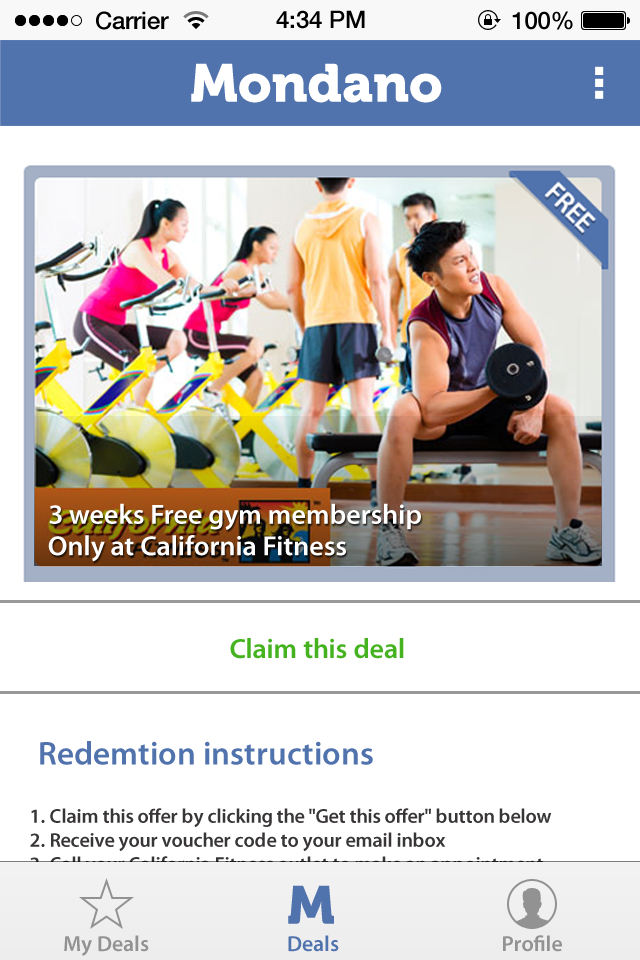
<style>
.page{position:relative;width:640px;height:960px;background:#ffffff}
.page>*{position:absolute;margin:0}
.t1{font:24px "HelveticaNeue-Medium";color:#000000}
.t2{font:53.3px "Museo900-Regular";color:#ffffff}
.t3{font:28px "MyriadPro-Semibold";color:#ffffff}
.t4{font:28px "MyriadPro-Semibold";letter-spacing:0.005em;color:#45b21f}
.t5{font:33px "MyriadPro-Semibold";color:#5173ad}
.t6{font:20px "MyriadPro-Semibold"}
.t7{font:53.3px "Museo900-Regular";color:#5173ad}
.t8{font:22px "MyriadPro-Semibold";color:#929292}
.t9{font:22px "MyriadPro-Semibold";color:#5173ad}
</style>
<div class="page">
<p class="t1" style="left:96px;top:11px;width:73px;height:19px">Carrier</p>
<p class="t1" style="left:276px;top:10px;width:89px;height:19px">4:34 PM</p>
<p class="t1" style="left:512px;top:11px;width:61px;height:19px">100%</p>
<p class="t2" style="left:191px;top:63px;width:251px;height:40px">Mondano</p>
<p class="t3" style="left:49px;top:503px;width:372px;height:27px">3 weeks Free gym membership</p>
<p class="t3" style="left:48px;top:535px;width:298px;height:27px">Only at California Fitness</p>
<p class="t4" style="left:230px;top:638px;width:174px;height:21px">Claim this deal</p>
<p class="t5" style="left:40px;top:741px;width:333px;height:24px">Redemtion instructions</p>
<p class="t6" style="left:30px;top:808px;width:569px;height:115px">1. Claim this offer by clicking the "Get this offer" button below<br>2. Receive your voucher code to your email inbox<br>3. Call your California Fitness outlet to make an appointment<br>4. Enjoy your membership! Don't forget to bring your voucher code <br>to your first visit.</p>
<p class="t7" style="left:288px;top:885px;width:46px;height:39px">M</p>
<p class="t8" style="left:64px;top:935px;width:85px;height:21px">My Deals</p>
<p class="t9" style="left:288px;top:935px;width:51px;height:17px">Deals</p>
<p class="t8" style="left:503px;top:935px;width:59px;height:17px">Profile</p>
</div>
